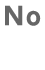
<style>
.page{position:relative;width:45px;height:70px;background:#ffffff}
.page>*{position:absolute;margin:0}
.t1{font:26px "Transport-Heavy-Regular";color:#666666}
</style>
<div class="page">
<p class="t1" style="left:5px;top:5px;width:36px;height:21px">No</p>
</div>
